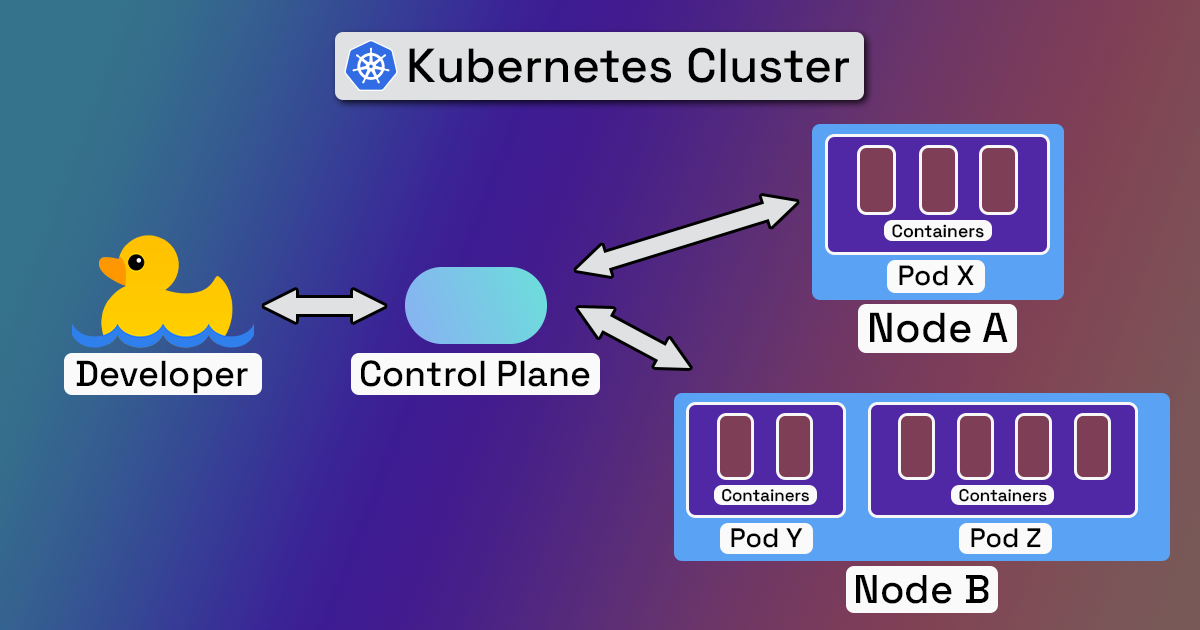
<style>
.page{position:relative;width:1200px;height:630px}
.page>*{position:absolute;margin:0}
.t1{font:48px "SpaceGrotesk-Medium";color:#000000}
.t2{font:17.5px "SpaceGrotesk-Medium";color:#000000}
.t3{font:27.9px "SpaceGrotesk-Medium";color:#000000}
.t4{font:41.8px "SpaceGrotesk-Medium";color:#000000}
.t5{font:36px "SpaceGrotesk-Medium";color:#000000}
.t6{font:16.8px "SpaceGrotesk-Medium";color:#000000}
.t7{font:26.7px "SpaceGrotesk-Medium";color:#000000}
.t8{font:40px "SpaceGrotesk-Medium";color:#000000}
</style>
<div class="page">
<p class="t1" style="left:409px;top:47px;width:440px;height:36px">Kubernetes Cluster</p>
<p class="t2" style="left:892px;top:224px;width:92px;height:14px">Containers</p>
<p class="t3" style="left:899px;top:265px;width:75px;height:21px">Pod X</p>
<p class="t4" style="left:870px;top:312px;width:138px;height:31px">Node A</p>
<p class="t5" style="left:76px;top:360px;width:172px;height:34px">Developer</p>
<p class="t5" style="left:361px;top:360px;width:229px;height:27px">Control Plane</p>
<p class="t6" style="left:722px;top:488px;width:87px;height:14px">Containers</p>
<p class="t6" style="left:959px;top:488px;width:88px;height:14px">Containers</p>
<p class="t7" style="left:731px;top:528px;width:72px;height:20px">Pod Y</p>
<p class="t7" style="left:971px;top:528px;width:70px;height:20px">Pod Z</p>
<p class="t8" style="left:856px;top:575px;width:133px;height:29px">Node B</p>
</div>
